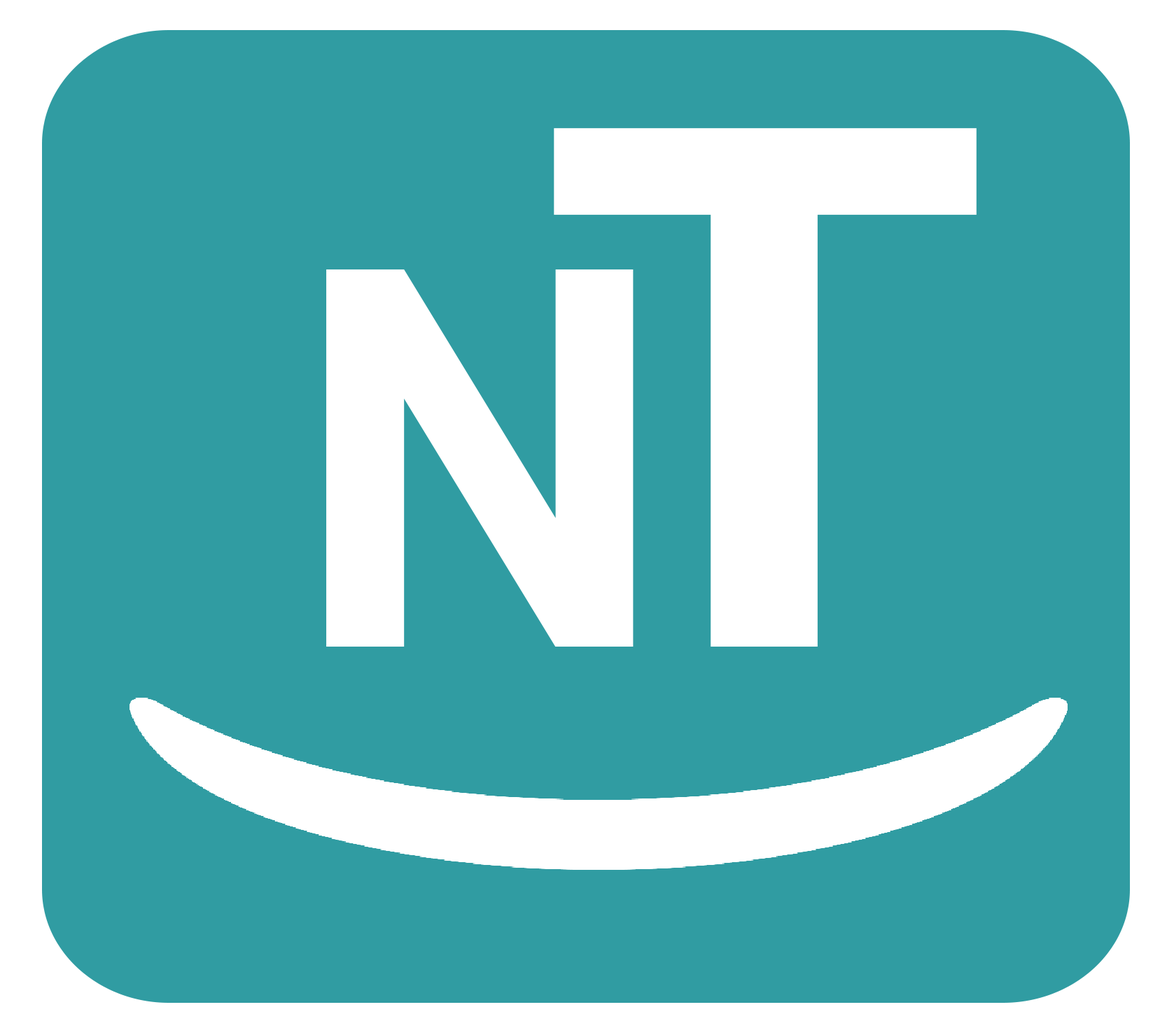
<style>
.page{position:relative;width:1160px;height:1028px;background:#309ca2}
.page>*{position:absolute;margin:0}
.t1{font:729.1px "Shabnam-Bold";letter-spacing:0.02em;color:#ffffff}
.t2{font:530.8px "Shabnam-Bold";letter-spacing:0.02em;color:#ffffff}
</style>
<div class="page">
<p class="t1" style="left:554px;top:128px;width:422px;height:519px">T</p>
<p class="t2" style="left:326px;top:269px;width:307px;height:378px">N</p>
</div>
